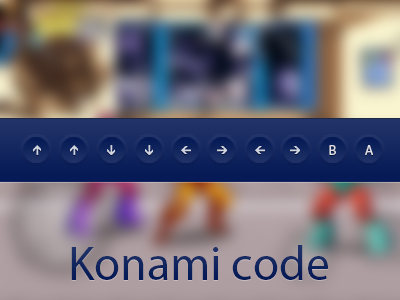
<style>
.page{position:relative;width:400px;height:300px}
.page>*{position:absolute;margin:0}
.t1{font:14px "MyriadPro-Regular";color:#dedfe5}
.t2{font:48px "MyriadPro-Regular";color:#0e225b}
</style>
<div class="page">
<p class="t1" style="left:329px;top:145px;width:7px;height:10px">B</p>
<p class="t1" style="left:365px;top:145px;width:8px;height:10px">A</p>
<p class="t2" style="left:71px;top:245px;width:257px;height:35px">Konami code</p>
</div>
